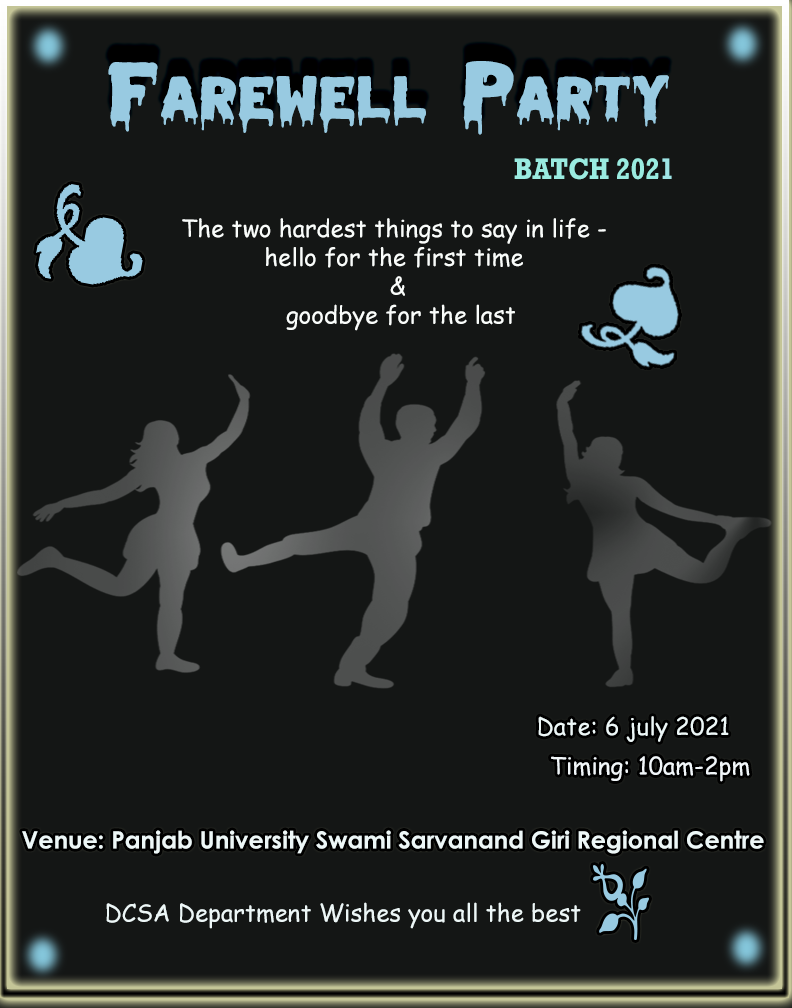
<style>
.page{position:relative;width:792px;height:1008px;background:#141615}
.page>*{position:absolute;margin:0}
.t1{font:59.4px "MeltedMonster";color:#98cae1;scale:1.23 1}
.t2{font:82.9px "MeltedMonster";color:#98cae1;scale:1.23 1}
.t3{font:30px "Rockwell-Bold";color:#9aebe0;scale:0.89 1}
.t4{font:30px "Rockwell-Bold";color:#9fe4e5;scale:0.89 1}
.t5{font:24px "ComicSansMS";color:#edf7f7}
.t6{font:24px "ComicSansMS";color:#f1f6f9}
.t7{font:24px "CenturyGothic-Bold";color:#edf7f7}
</style>
<div class="page">
<p class="t1" style="left:108px;top:61px;width:561px;height:74px"><span class="t2">F</span>AREWELL <span class="t2">P</span>ARTY</p>
<p class="t3" style="left:514px;top:158px;width:158px;height:22px">BATCH 202<span class="t4">1</span></p>
<p class="t5" style="left:182px;top:218px;width:424px;height:113px;text-align:center">The two hardest things to say in life - <br>hello for the first time <br>&amp;<br> goodbye for the last</p>
<p class="t5" style="left:538px;top:716px;width:191px;height:26px">Date: 6 july 2021</p>
<p class="t6" style="left:551px;top:756px;width:199px;height:26px">Timing: 10am-2pm</p>
<p class="t7" style="left:22px;top:830px;width:742px;height:24px">Venue: Panjab University Swami Sarvanand Giri Regional Centre</p>
<p class="t5" style="left:106px;top:902px;width:475px;height:27px">DCSA Department Wishes you all the best</p>
</div>
